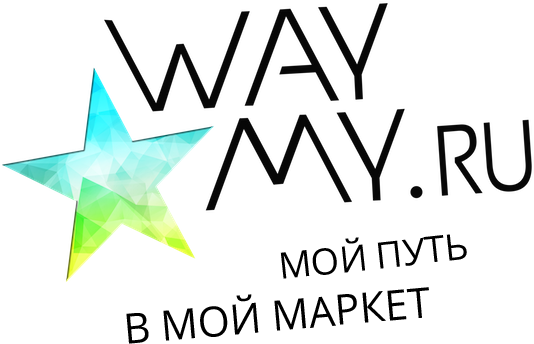
<style>
.page{position:relative;width:534px;height:344px;background:#ffffff}
.page>*{position:absolute;margin:0}
.t1{font:36.5px "OpenSans";color:#000000}
.t2{font:41.9px "OpenSans";color:#000000}
</style>
<div class="page">
<p class="t1" style="left:280px;top:234px;width:187px;height:45px;rotate:-6deg">МОЙ ПУТЬ</p>
<p class="t2" style="left:126px;top:287px;width:303px;height:57px;rotate:-5deg">В МОЙ МАРКЕТ</p>
</div>
